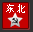
<style>
.page{position:relative;width:33px;height:32px;background:#c50000}
.page>*{position:absolute;margin:0}
.t1{font:10.4px "SimSun";color:#ffffff}
</style>
<div class="page">
<p class="t1" style="left:6px;top:4px;width:19px;height:9px">东北</p>
</div>
